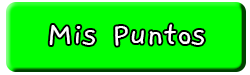
<style>
.page{position:relative;width:250px;height:75px;background:#00ff00}
.page>*{position:absolute;margin:0}
.t1{font:36px "Gaegu-Regular";color:#ffffff}
</style>
<div class="page">
<p class="t1" style="left:49px;top:24px;width:155px;height:22px">Mis Puntos</p>
</div>
